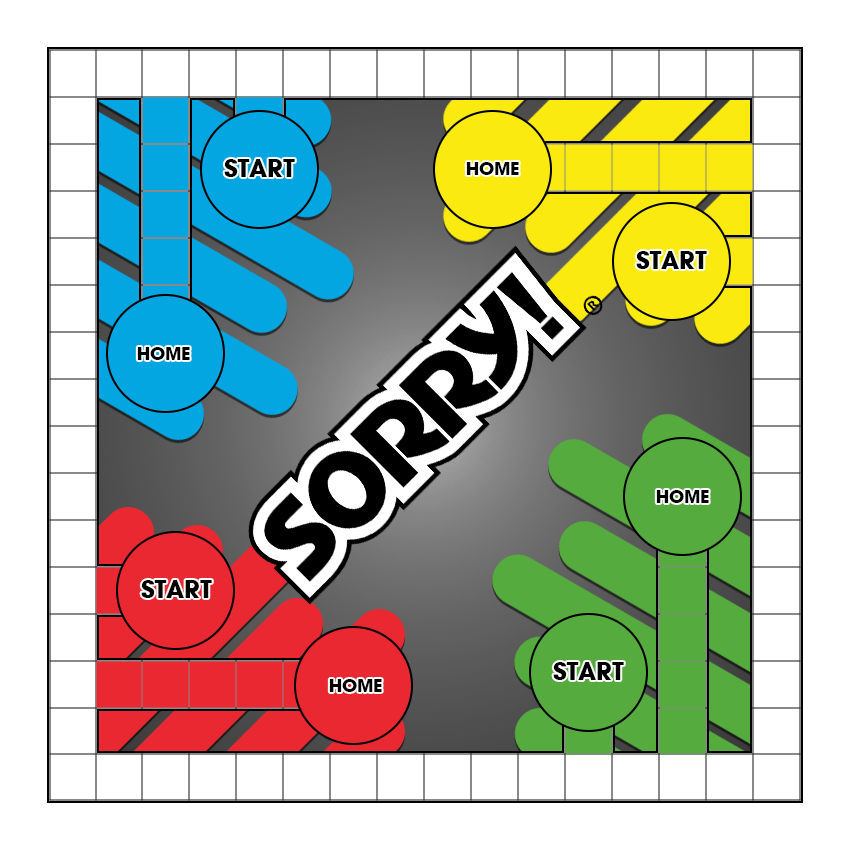
<style>
.page{position:relative;width:850px;height:850px;background:#ffffff}
.page>*{position:absolute;margin:0}
.t1{font:24px "AvantGardeLT-Bold";color:#000000}
.t2{font:12px "ArialMT";color:#000000}
.t3{font:17.5px "AvantGardeLT-Bold";color:#000000}
.t4{font:8.8px "ArialMT";color:#000000}
</style>
<div class="page">
<p class="t1" style="left:224px;top:159px;width:71px;height:18px"><span class="t2"><br><br><br></span>START</p>
<p class="t3" style="left:466px;top:162px;width:53px;height:13px"><span class="t4"><br><br><br></span>HOME</p>
<p class="t1" style="left:636px;top:251px;width:71px;height:18px"><span class="t2"><br><br><br></span>START</p>
<p class="t3" style="left:137px;top:347px;width:53px;height:13px"><span class="t4"><br><br><br></span>HOME</p>
<p class="t3" style="left:656px;top:490px;width:53px;height:13px"><span class="t4"><br><br><br></span>HOME</p>
<p class="t1" style="left:141px;top:580px;width:71px;height:18px"><span class="t2"><br><br><br></span>START</p>
<p class="t1" style="left:553px;top:662px;width:71px;height:18px"><span class="t2"><br><br><br></span>START</p>
<p class="t3" style="left:329px;top:679px;width:53px;height:13px"><span class="t4"><br><br><br></span>HOME</p>
</div>
